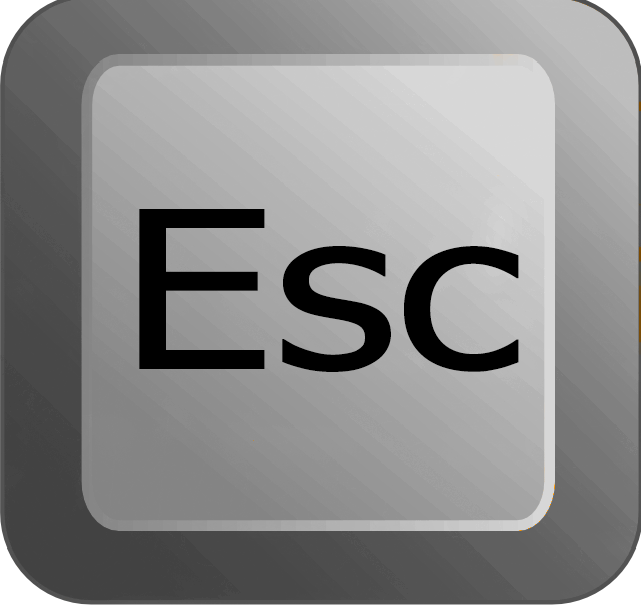
<style>
.page{position:relative;width:641px;height:605px}
.page>*{position:absolute;margin:0}
.t1{font:220px "Tahoma";color:#000000;scale:1.25 1}
</style>
<div class="page">
<p class="t1" style="left:139px;top:209px;width:380px;height:163px">Esc</p>
</div>
